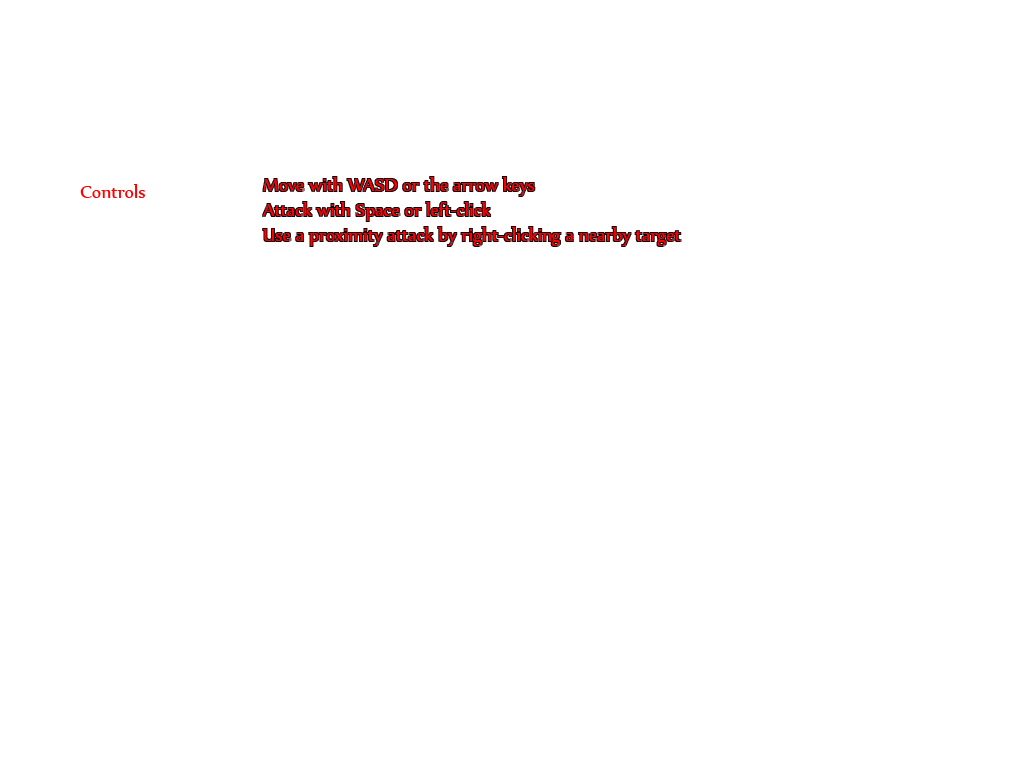
<style>
.page{position:relative;width:1024px;height:768px;background:#ffffff}
.page>*{position:absolute;margin:0}
.t1{font:21px "Nyala-Regular";color:#ff0000}
</style>
<div class="page">
<p class="t1" style="left:80px;top:184px;width:65px;height:14px">Controls</p>
<p class="t1" style="left:263px;top:177px;width:418px;height:69px">Move with WASD or the arrow keys<br>Attack with Space or left-click<br>Use a proximity attack by right-clicking a nearby target</p>
</div>
